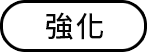
<style>
.page{position:relative;width:147px;height:52px;background:#ffffff}
.page>*{position:absolute;margin:0}
.t1{font:29.2px "NotoSansCJKtc-Medium";letter-spacing:0.06em;color:#060606}
</style>
<div class="page">
<p class="t1" style="left:46px;top:12px;width:57px;height:28px">強化</p>
</div>
